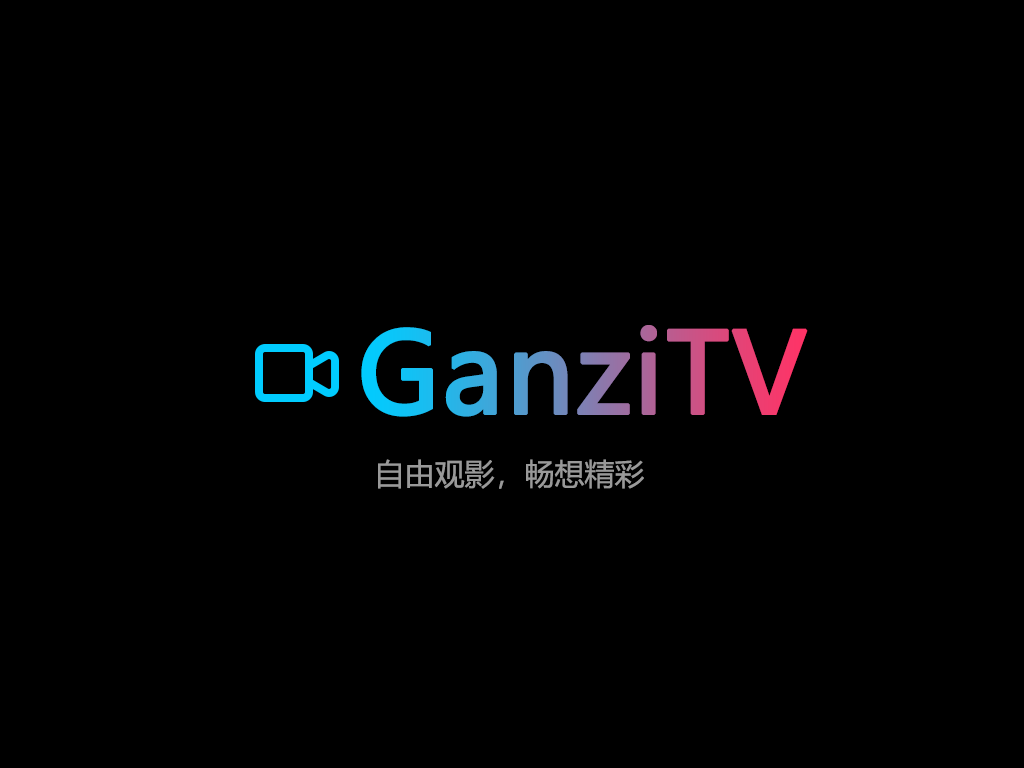
<style>
.page{position:relative;width:1024px;height:768px;background:#000000}
.page>*{position:absolute;margin:0}
.t1{font:110px "MicrosoftYaHei";font-weight:bold}
.t2{font:30px "MicrosoftYaHei";color:#999999}
</style>
<div class="page">
<p class="t1" style="left:361px;top:325px;width:447px;height:92px">GanziTV</p>
<p class="t2" style="left:378px;top:459px;width:266px;height:30px">自由观影，畅想精彩</p>
</div>
